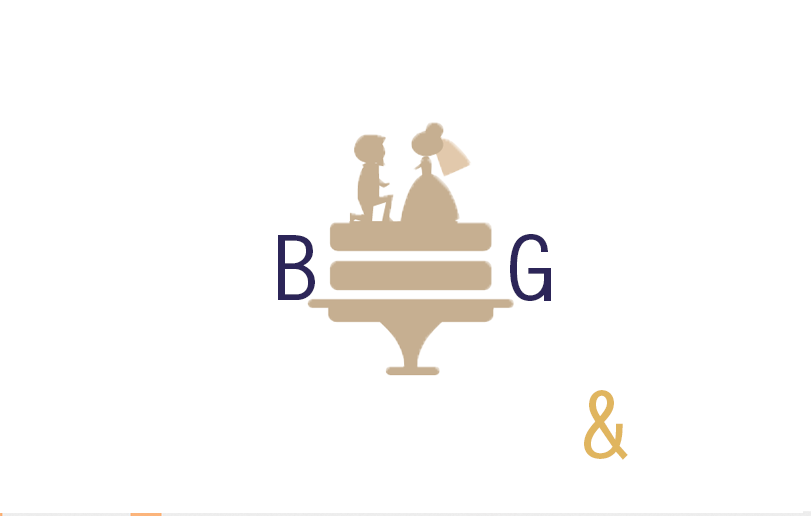
<style>
.page{position:relative;width:811px;height:516px;background:#ffffff}
.page>*{position:absolute;margin:0}
.t1{font:89.7px "LetterGothicStd-Bold";color:#2c2558}
.t2{font:93.2px "LetterGothicStd-Bold";color:#e0b55f}
</style>
<div class="page">
<p class="t1" style="left:278px;top:235px;width:37px;height:65px">B</p>
<p class="t1" style="left:510px;top:234px;width:41px;height:67px">G</p>
<p class="t2" style="left:584px;top:390px;width:44px;height:70px">&amp;</p>
</div>
